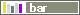
<style>
.page{position:relative;width:80px;height:15px;background:#898e79}
.page>*{position:absolute;margin:0}
.t1{font:12px "ArialRoundedMTBold";letter-spacing:0.05em;color:#ffffff;scale:0.83 1}
</style>
<div class="page">
<p class="t1" style="left:30px;top:2px;width:18px;height:13px">bar</p>
</div>
